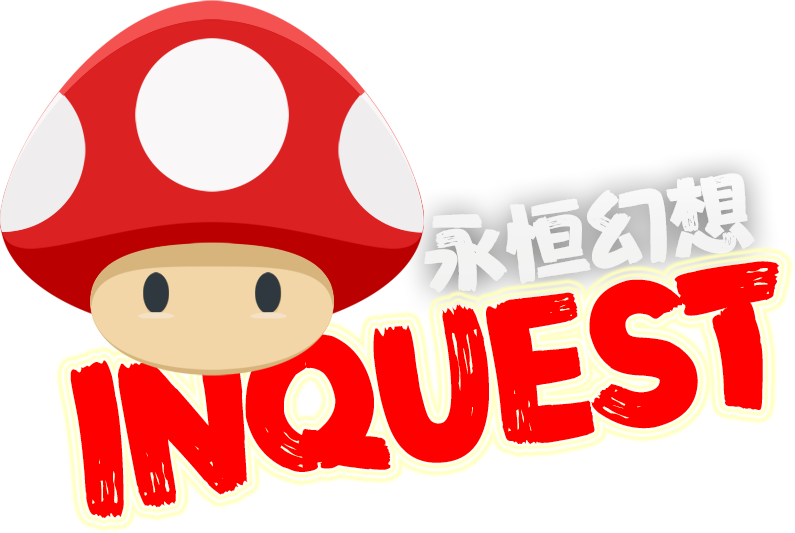
<style>
.page{position:relative;width:795px;height:533px;background:#ffffff}
.page>*{position:absolute;margin:0}
.t1{font:83px "FZFENSTXJW--GB1-0";color:#ffffff}
.t2{font:183.2px "FZFENSTXJW--GB1-0";letter-spacing:-0.08em;color:#ff0000}
</style>
<div class="page">
<p class="t1" style="left:424px;top:173px;width:331px;height:120px;rotate:-9deg">永恒幻想</p>
<p class="t2" style="left:70px;top:261px;width:710px;height:257px;rotate:-9deg">INQUEST</p>
</div>
